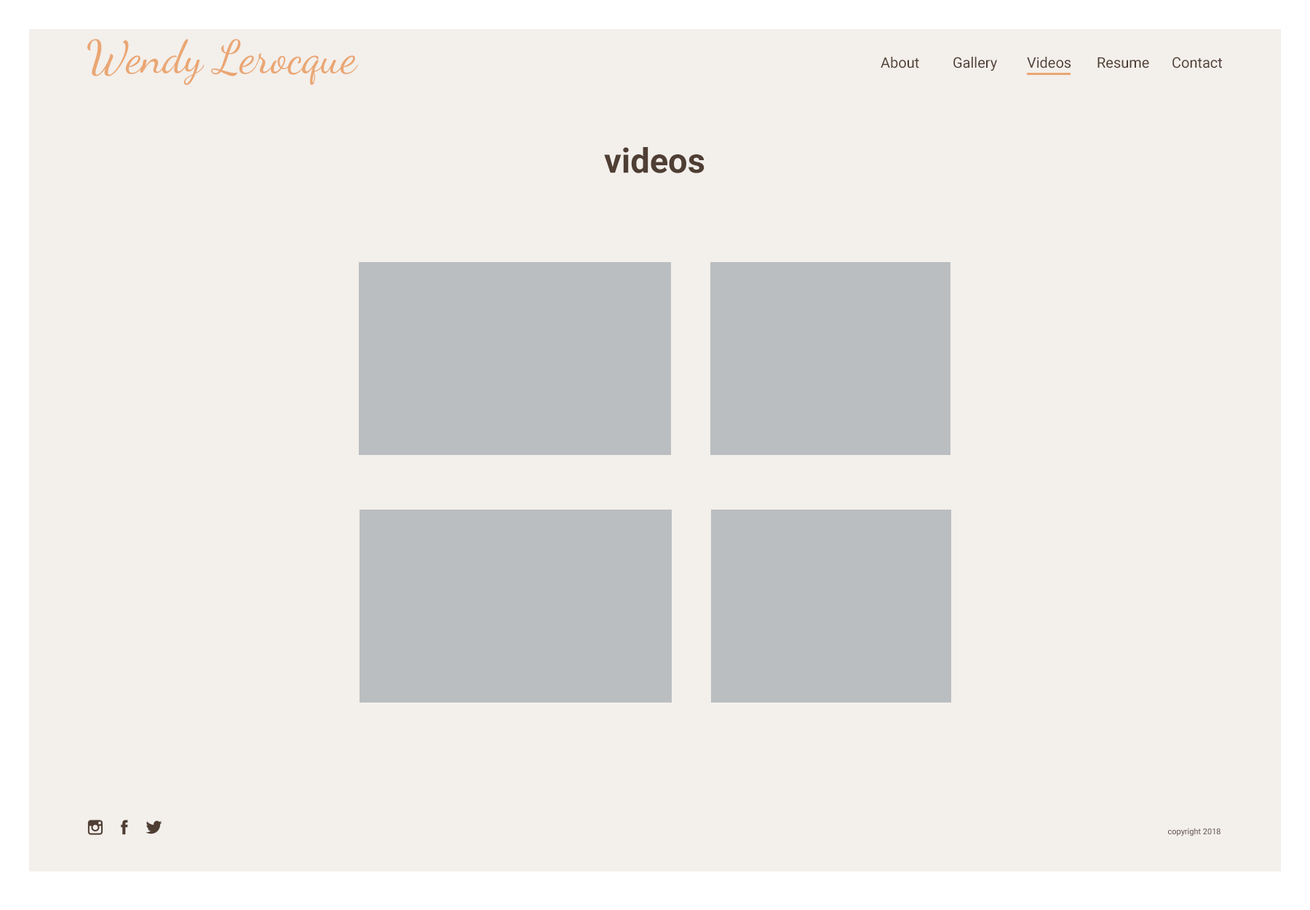
<style>
.page{position:relative;width:1310px;height:910px;background:#f3efeb}
.page>*{position:absolute;margin:0}
.t1{font:45.9px "DancingScript-Regular";color:#eaa673}
.t2{font:14.6px "Roboto-Regular";color:#4f3e33}
.t3{font:34.2px "Roboto-Bold";color:#4f3e33}
.t4{font:8px "Roboto-Regular";color:#4f3e33}
</style>
<div class="page">
<p class="t1" style="left:87px;top:39px;width:271px;height:46px">Wendy Lerocque</p>
<p class="t2" style="left:881px;top:57px;width:38px;height:11px">About</p>
<p class="t2" style="left:954px;top:57px;width:43px;height:14px">Gallery</p>
<p class="t2" style="left:1027px;top:57px;width:44px;height:11px">Videos</p>
<p class="t2" style="left:1098px;top:57px;width:51px;height:11px">Resume</p>
<p class="t2" style="left:1173px;top:57px;width:49px;height:11px">Contact</p>
<p class="t3" style="left:604px;top:147px;width:101px;height:26px">videos</p>
<p class="t4" style="left:1168px;top:828px;width:53px;height:8px">copyright 2018</p>
</div>
